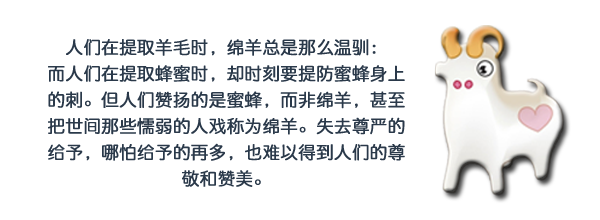
<style>
.page{position:relative;width:600px;height:220px;background:#ffffff}
.page>*{position:absolute;margin:0}
.t1{font:17.5px/26.2px "QingYuanMono";color:#2a394a;font-weight:bold}
</style>
<div class="page">
<p class="t1" style="left:48px;top:39px;width:357px;height:148px;text-align:center">人们在提取羊毛时，绵羊总是那么温驯：<br>而人们在提取蜂蜜时，却时刻要提防蜜蜂身上<br>的刺。但人们赞扬的是蜜蜂，而非绵羊，甚至<br>把世间那些懦弱的人戏称为绵羊。失去尊严的<br>给予，哪怕给予的再多，也难以得到人们的尊<br>敬和赞美。</p>
</div>
